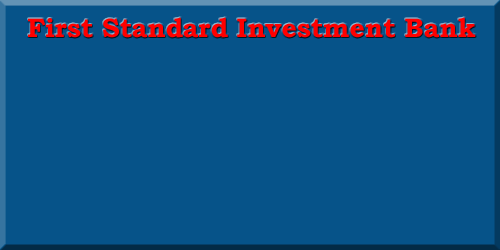
<style>
.page{position:relative;width:500px;height:250px;background:#065389}
.page>*{position:absolute;margin:0}
.t1{font:26.7px "BookmanOldStyle-Bold";color:#ff0000}
</style>
<div class="page">
<p class="t1" style="left:28px;top:17px;width:448px;height:21px">First Standard Investment Bank</p>
</div>
